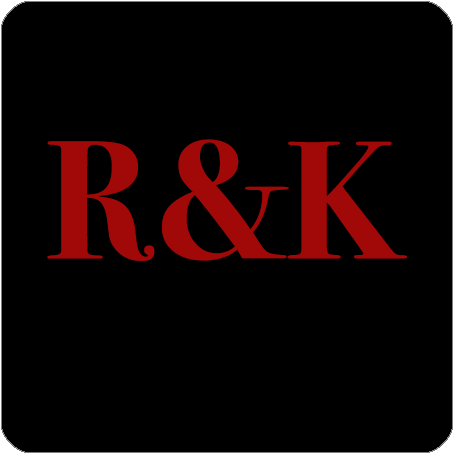
<style>
.page{position:relative;width:454px;height:454px;background:#000000}
.page>*{position:absolute;margin:0}
.t1{font:168.6px "BodoniSvtyTwoOSITCTT-Bold";color:#a10909}
</style>
<div class="page">
<p class="t1" style="left:47px;top:139px;width:360px;height:122px">R&amp;K</p>
</div>
